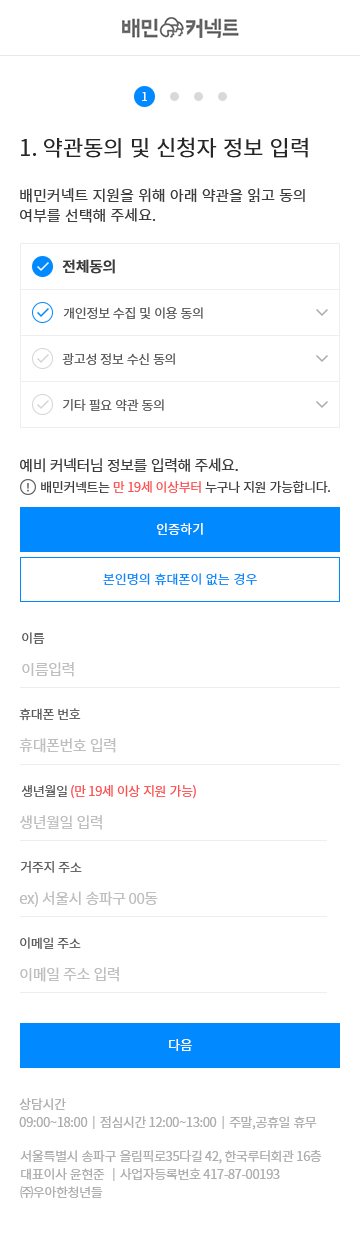
<style>
.page{position:relative;width:360px;height:1251px;background:#ffffff}
.page>*{position:absolute;margin:0}
.t1{font:11.8px "NotoSansCJKkr-Regular";color:#ffffff}
.t2{font:22px "NotoSansCJKkr-Regular";color:#272727}
.t3{font:15px/20px "NotoSansCJKkr-Regular";color:#3d3d3d}
.t4{font:15px "NotoSansCJKkr-Bold";letter-spacing:-0.03em;color:#3d3d3d}
.t5{font:13px "NotoSansCJKkr-Regular";letter-spacing:-0.03em;color:#595959}
.t6{font:15px "NotoSansCJKkr-Regular";letter-spacing:-0.03em;color:#3d3d3d}
.t7{font:13px "NotoSansCJKkr-Regular";letter-spacing:-0.03em;color:#3d3d3d}
.t8{font:13px "NotoSansCJKkr-Regular";letter-spacing:-0.03em;color:#ff4f4f}
.t9{font:13px "NotoSansCJKkr-Regular";color:#ffffff}
.t10{font:13px "NotoSansCJKkr-Regular";color:#018aff}
.t11{font:15px "NotoSansCJKkr-Regular";letter-spacing:-0.03em;color:#bfbfbf}
.t12{font:13px "NotoSansCJKkr-Regular";letter-spacing:-0.03em;color:#ff4e4e}
.t13{font:13px/18px "NotoSansCJKkr-Regular";letter-spacing:-0.03em;color:#adadad}
</style>
<div class="page">
<p class="t1" style="left:142px;top:92px;width:5px;height:9px">1</p>
<p class="t2" style="left:21px;top:137px;width:287px;height:21px">1. 약관동의 및 신청자 정보 입력</p>
<p class="t3" style="left:20px;top:188px;width:285px;height:35px">배민커넥트 지원을 위해 아래 약관을 읽고 동의 <br>여부를 선택해 주세요.</p>
<p class="t4" style="left:62px;top:259px;width:53px;height:15px">전체동의</p>
<p class="t5" style="left:63px;top:307px;width:140px;height:13px">개인정보 수집 및 이용 동의</p>
<p class="t5" style="left:62px;top:353px;width:113px;height:12px">광고성 정보 수신 동의</p>
<p class="t5" style="left:63px;top:399px;width:101px;height:13px">기타 필요 약관 동의</p>
<p class="t6" style="left:20px;top:458px;width:218px;height:15px">예비 커넥터님 정보를 입력해 주세요.</p>
<p class="t7" style="left:41px;top:480px;width:289px;height:14px">배민커넥트는 <span class="t8">만 19세 이상부터</span> 누구나 지원 가능합니다.</p>
<p class="t9" style="left:157px;top:523px;width:46px;height:12px">인증하기</p>
<p class="t10" style="left:103px;top:573px;width:154px;height:13px">본인명의 휴대폰이 없는 경우</p>
<p class="t5" style="left:22px;top:632px;width:23px;height:12px">이름</p>
<p class="t11" style="left:22px;top:662px;width:52px;height:15px">이름입력</p>
<p class="t5" style="left:19px;top:708px;width:62px;height:13px">휴대폰 번호</p>
<p class="t11" style="left:19px;top:738px;width:97px;height:15px">휴대폰번호 입력</p>
<p class="t12" style="left:21px;top:785px;width:175px;height:14px"><span class="t5">생년월일 </span>(만 19세 이상 지원 가능)</p>
<p class="t11" style="left:20px;top:815px;width:82px;height:15px">생년월일 입력</p>
<p class="t5" style="left:20px;top:861px;width:62px;height:12px">거주지 주소</p>
<p class="t11" style="left:19px;top:891px;width:139px;height:16px">ex) 서울시 송파구 00동</p>
<p class="t5" style="left:20px;top:937px;width:61px;height:12px">이메일 주소</p>
<p class="t11" style="left:20px;top:967px;width:99px;height:15px">이메일 주소 입력</p>
<p class="t9" style="left:169px;top:1039px;width:23px;height:12px">다음</p>
<p class="t13" style="left:19px;top:1098px;width:298px;height:32px">상담시간 <br>09:00~18:00│점심시간 12:00~13:00│주말,공휴일 휴무</p>
<p class="t13" style="left:20px;top:1150px;width:302px;height:49px">서울특별시 송파구 올림픽로35다길 42, 한국루터회관 16층 <br>대표이사 윤현준 │사업자등록번호 417-87-00193<br>㈜우아한청년들</p>
</div>
